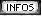
<style>
.page{position:relative;width:42px;height:16px}
.page>*{position:absolute;margin:0}
.t1{font:8.4px "Minecraft";letter-spacing:-0.015em;color:#000000;text-transform:uppercase;font-weight:bold;scale:1.05 1}
</style>
<div class="page">
<p class="t1" style="left:6px;top:4px;width:28px;height:7px">infos</p>
</div>
